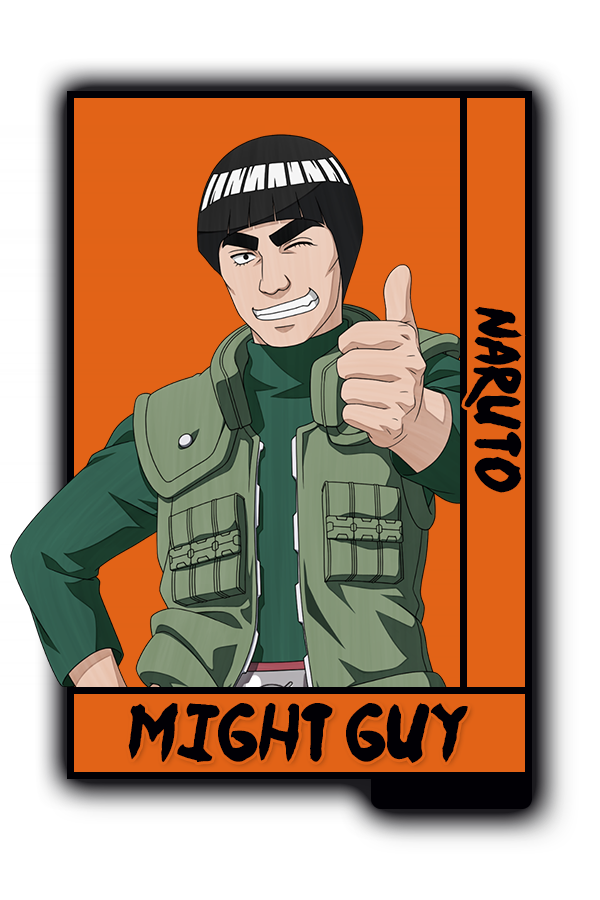
<style>
.page{position:relative;width:600px;height:900px;background:#ffffff}
.page>*{position:absolute;margin:0}
.t1{font:52px "Ninja-Naruto";color:#010005}
.t2{font:65.2px "Ninja-Naruto";color:#010005}
</style>
<div class="page">
<p class="t1" style="left:464px;top:307px;width:59px;height:186px;rotate:90deg">Naruto</p>
<p class="t2" style="left:128px;top:702px;width:340px;height:61px">Might Guy</p>
</div>
